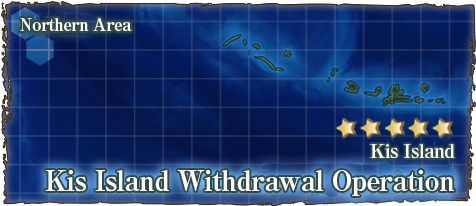
<style>
.page{position:relative;width:476px;height:206px}
.page>*{position:absolute;margin:0}
.t1{font:17px "RyuminPro-ExBold";letter-spacing:-0.04em;color:#ffffff}
.t2{font:19px "RyuminPro-ExBold";letter-spacing:-0.04em;color:#ffffff}
.t3{font:28px "RyuminPro-ExBold";letter-spacing:-0.04em;color:#ffffff}
</style>
<div class="page">
<p class="t1" style="left:20px;top:18px;width:112px;height:13px">Northern Area</p>
<p class="t2" style="left:370px;top:144px;width:85px;height:15px">Kis Island</p>
<p class="t3" style="left:45px;top:170px;width:409px;height:26px">Kis Island Withdrawal Operation</p>
</div>
